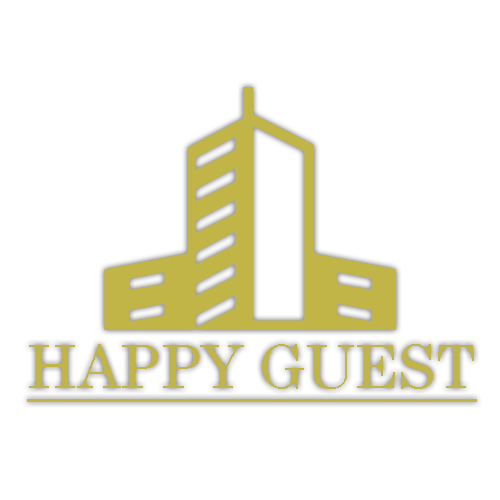
<style>
.page{position:relative;width:500px;height:500px;background:#ffffff}
.page>*{position:absolute;margin:0}
.t1{font:60px "CenturySchoolbook";color:#c2b548;text-decoration:underline}
</style>
<div class="page">
<p class="t1" style="left:27px;top:344px;width:450px;height:58px">HAPPY GUEST</p>
</div>
